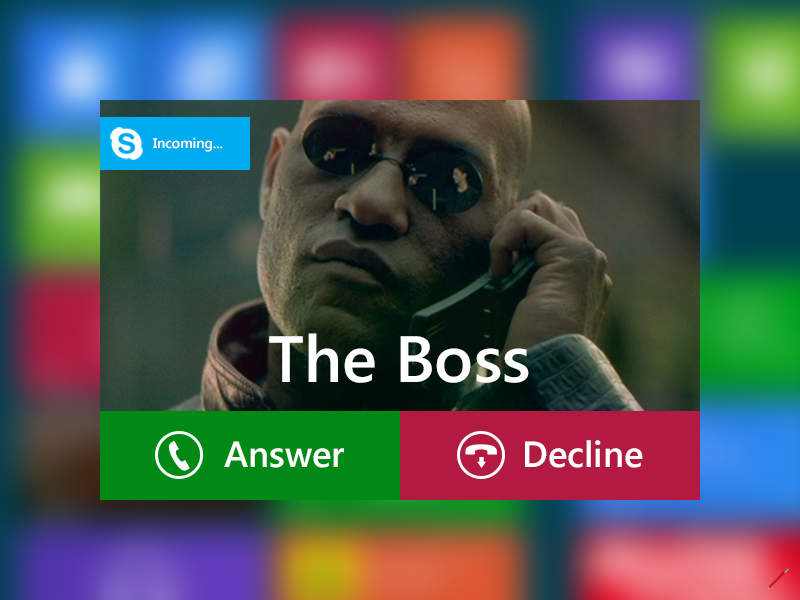
<style>
.page{position:relative;width:800px;height:600px}
.page>*{position:absolute;margin:0}
.t1{font:14px "SegoeUI-SemiBold";color:#ffffff}
.t2{font:65.4px "SegoeUI-SemiBold";color:#ffffff}
.t3{font:36.3px "SegoeUI-SemiBold";color:#ffffff}
</style>
<div class="page">
<p class="t1" style="left:153px;top:137px;width:70px;height:15px">Incoming...</p>
<p class="t2" style="left:269px;top:333px;width:260px;height:50px">The Boss</p>
<p class="t3" style="left:224px;top:441px;width:120px;height:27px">Answer</p>
<p class="t3" style="left:525px;top:440px;width:118px;height:28px">Decline</p>
</div>
